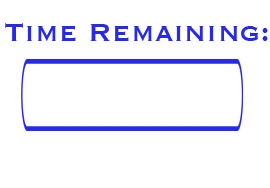
<style>
.page{position:relative;width:270px;height:188px;background:#ffffff}
.page>*{position:absolute;margin:0}
.t1{font:33.3px "Copperplate";color:#272ae8}
</style>
<div class="page">
<p class="t1" style="left:5px;top:23px;width:263px;height:18px">Time Remaining:</p>
</div>
